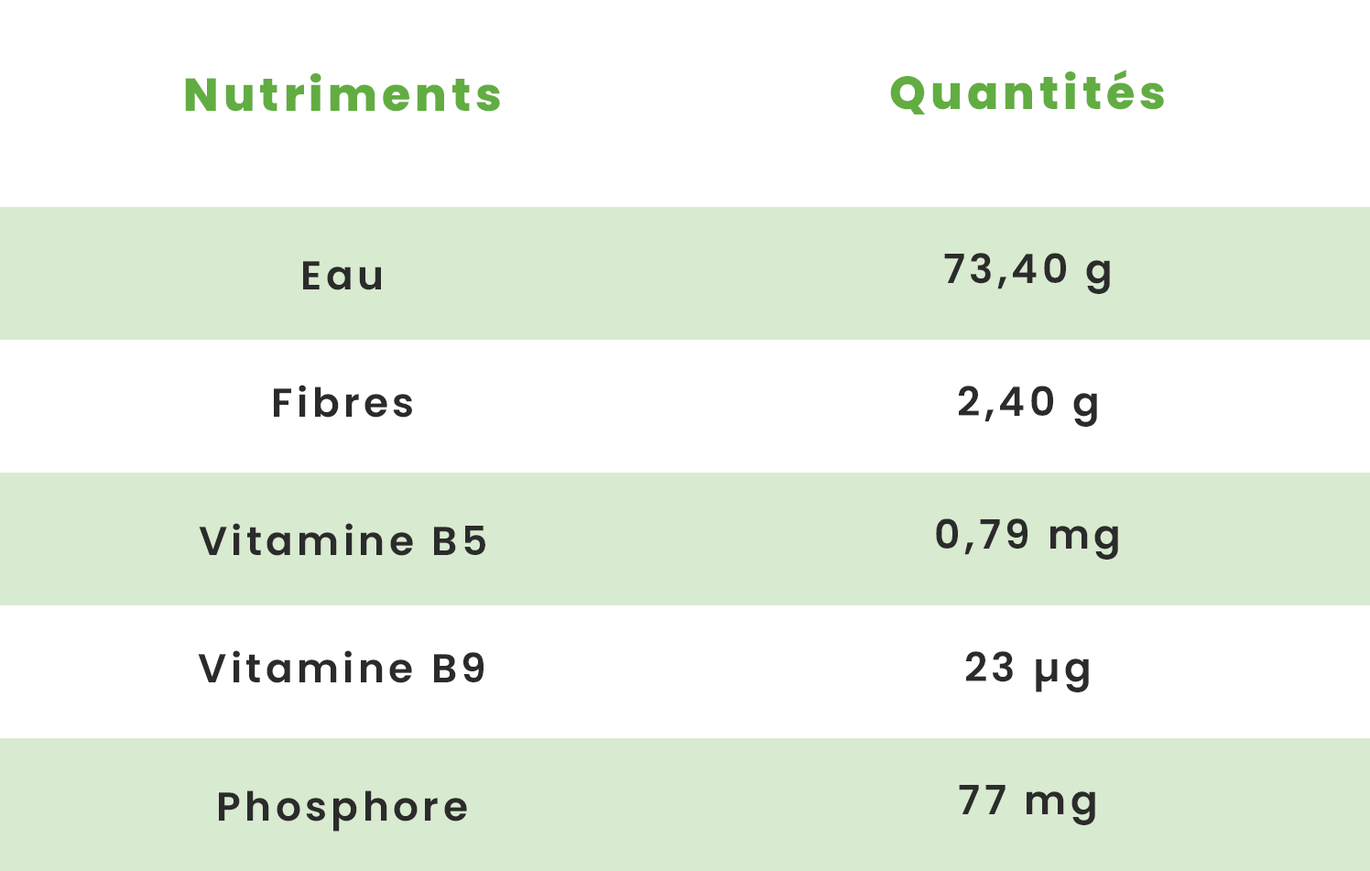
<style>
.page{position:relative;width:1370px;height:871px;background:#ffffff}
.page>*{position:absolute;margin:0}
.t1{font:46.1px "Poppins-ExtraBold";letter-spacing:0.1em;color:#62ad42}
.t2{font:40.2px "Poppins-SemiBold";letter-spacing:0.1em;color:#2b2b2b}
</style>
<div class="page">
<p class="t1" style="left:185px;top:73px;width:315px;height:39px">Nutriments</p>
<p class="t1" style="left:890px;top:70px;width:274px;height:44px">Quantités</p>
<p class="t2" style="left:944px;top:253px;width:166px;height:41px">73,40 g</p>
<p class="t2" style="left:303px;top:261px;width:78px;height:29px">Eau</p>
<p class="t2" style="left:274px;top:385px;width:138px;height:32px">Fibres</p>
<p class="t2" style="left:959px;top:385px;width:138px;height:42px">2,40 g</p>
<p class="t2" style="left:936px;top:518px;width:182px;height:41px">0,79 mg</p>
<p class="t2" style="left:199px;top:523px;width:286px;height:33px">Vitamine B5</p>
<p class="t2" style="left:198px;top:650px;width:285px;height:33px">Vitamine B9</p>
<p class="t2" style="left:966px;top:651px;width:123px;height:41px">23 µg</p>
<p class="t2" style="left:959px;top:785px;width:136px;height:40px">77 mg</p>
<p class="t2" style="left:219px;top:790px;width:248px;height:41px">Phosphore</p>
</div>
